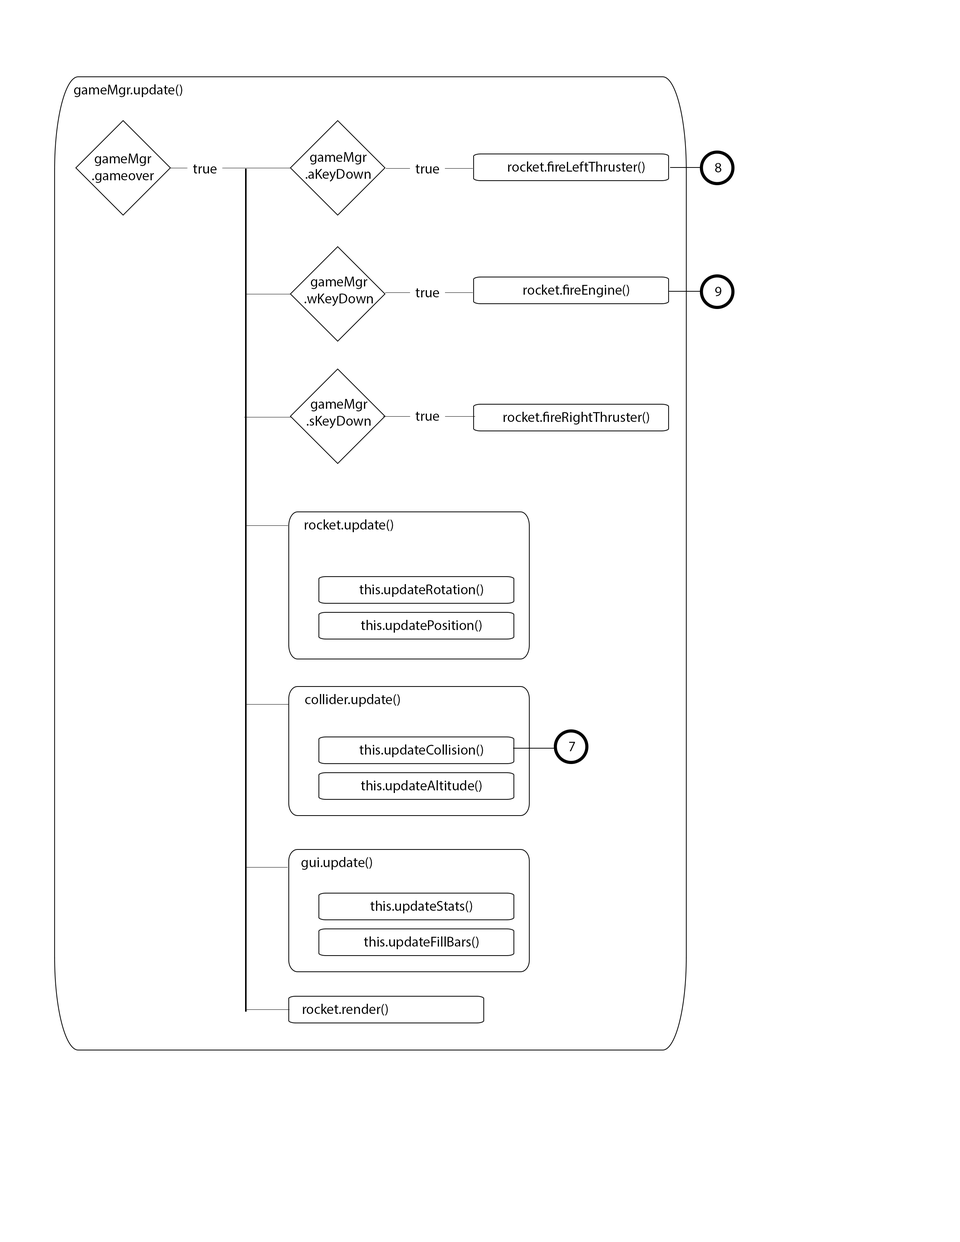
<style>
.page{position:relative;width:960px;height:1242px;background:#ffffff}
.page>*{position:absolute;margin:0}
.t1{font:14.1px "MyriadPro-Regular";color:#000000}
</style>
<div class="page">
<p class="t1" style="left:74px;top:84px;width:108px;height:13px">gameMgr.update()</p>
<p class="t1" style="left:92px;top:154px;width:62px;height:29px;text-align:center">gameMgr<br>.gameover</p>
<p class="t1" style="left:306px;top:152px;width:65px;height:30px;text-align:center">gameMgr<br>.aKeyDown</p>
<p class="t1" style="left:508px;top:161px;width:136px;height:12px">rocket.fireLeftThruster()</p>
<p class="t1" style="left:193px;top:164px;width:24px;height:10px">true</p>
<p class="t1" style="left:416px;top:164px;width:23px;height:10px">true</p>
<p class="t1" style="left:715px;top:163px;width:6px;height:9px">8</p>
<p class="t1" style="left:305px;top:277px;width:68px;height:29px;text-align:center">gameMgr<br>.wKeyDown</p>
<p class="t1" style="left:416px;top:288px;width:23px;height:9px">true</p>
<p class="t1" style="left:523px;top:285px;width:106px;height:12px">rocket.fireEngine()</p>
<p class="t1" style="left:715px;top:287px;width:6px;height:9px">9</p>
<p class="t1" style="left:307px;top:399px;width:64px;height:30px;text-align:center">gameMgr<br>.sKeyDown</p>
<p class="t1" style="left:416px;top:411px;width:23px;height:10px">true</p>
<p class="t1" style="left:503px;top:412px;width:146px;height:13px">rocket.fireRightThruster()</p>
<p class="t1" style="left:305px;top:519px;width:88px;height:13px">rocket.update()</p>
<p class="t1" style="left:359px;top:584px;width:124px;height:13px">this.updateRotation()</p>
<p class="t1" style="left:361px;top:620px;width:120px;height:13px">this.updatePosition()</p>
<p class="t1" style="left:305px;top:694px;width:95px;height:13px">collider.update()</p>
<p class="t1" style="left:359px;top:745px;width:124px;height:12px">this.updateCollision()</p>
<p class="t1" style="left:569px;top:742px;width:6px;height:9px">7</p>
<p class="t1" style="left:361px;top:780px;width:120px;height:13px">this.updateAltitude()</p>
<p class="t1" style="left:301px;top:857px;width:71px;height:13px">gui.update()</p>
<p class="t1" style="left:370px;top:901px;width:102px;height:13px">this.updateStats()</p>
<p class="t1" style="left:364px;top:937px;width:114px;height:12px">this.updateFillBars()</p>
<p class="t1" style="left:303px;top:1004px;width:85px;height:12px">rocket.render()</p>
</div>
